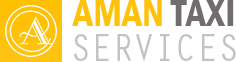
<style>
.page{position:relative;width:236px;height:62px;background:#ffffff}
.page>*{position:absolute;margin:0}
.t1{font:39.2px "FranklinGothic-DemiCond";color:#ffc10a;text-transform:uppercase}
.t2{font:39.2px "FranklinGothic-DemiCond";color:#716d6e;text-transform:uppercase}
.t3{font:39.1px "OratorStd";letter-spacing:-0.06em;color:#c3c3c3;text-transform:uppercase}
</style>
<div class="page">
<p class="t1" style="left:72px;top:0px;width:162px;height:26px">Aman <span class="t2">Taxi</span></p>
<p class="t3" style="left:74px;top:34px;width:162px;height:27px">services</p>
</div>
